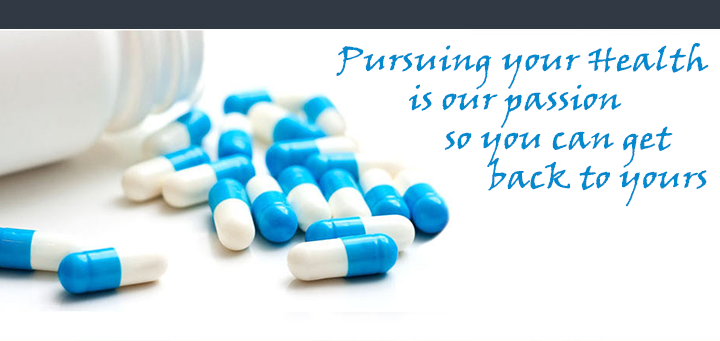
<style>
.page{position:relative;width:720px;height:341px;background:#ffffff}
.page>*{position:absolute;margin:0}
.t1{font:32.6px "VinerHandITC";color:#0389ce;scale:1.1 1}
</style>
<div class="page">
<p class="t1" style="left:336px;top:42px;width:373px;height:165px">Pursuing your Health <br>  is our passion <br>   so you can get<br>     back to yours</p>
</div>
